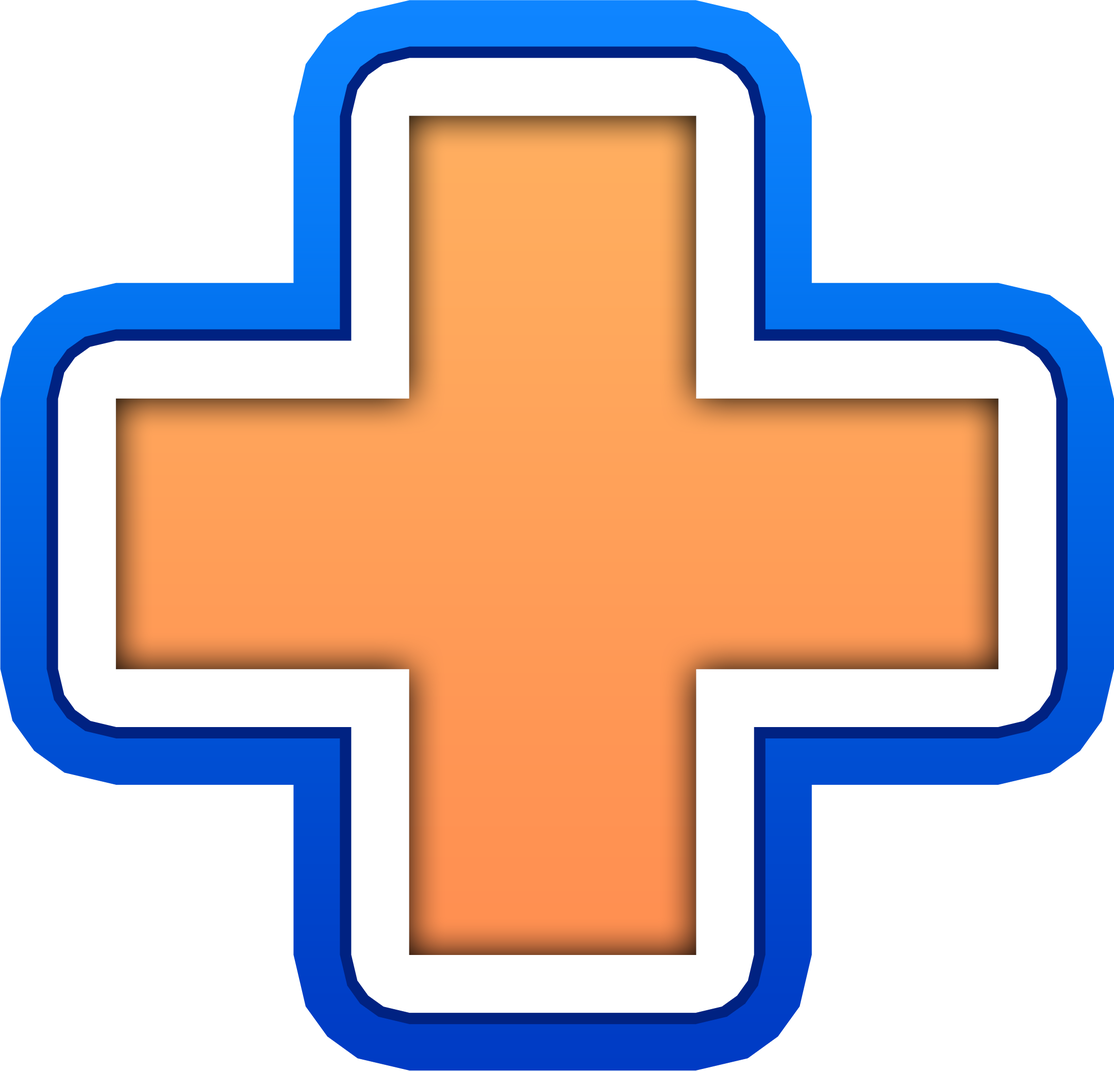
<style>
.page{position:relative;width:1114px;height:1071px;background:#ffffff}
.page>*{position:absolute;margin:0}
.t1{font:1503.3px "RodinPro-UB";letter-spacing:-0.015em;color:#ff9c57}
</style>
<div class="page">
<p class="t1" style="left:115px;top:115px;width:883px;height:840px">+</p>
<p class="t1" style="left:115px;top:115px;width:883px;height:840px">+</p>
</div>
